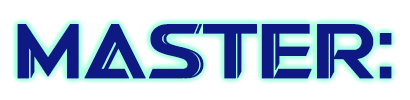
<style>
.page{position:relative;width:410px;height:100px;background:#ffffff}
.page>*{position:absolute;margin:0}
.t1{font:75px "SweraDemoShadowed";color:#0e1984;font-weight:bold}
</style>
<div class="page">
<p class="t1" style="left:17px;top:24px;width:375px;height:55px">Master:</p>
</div>
